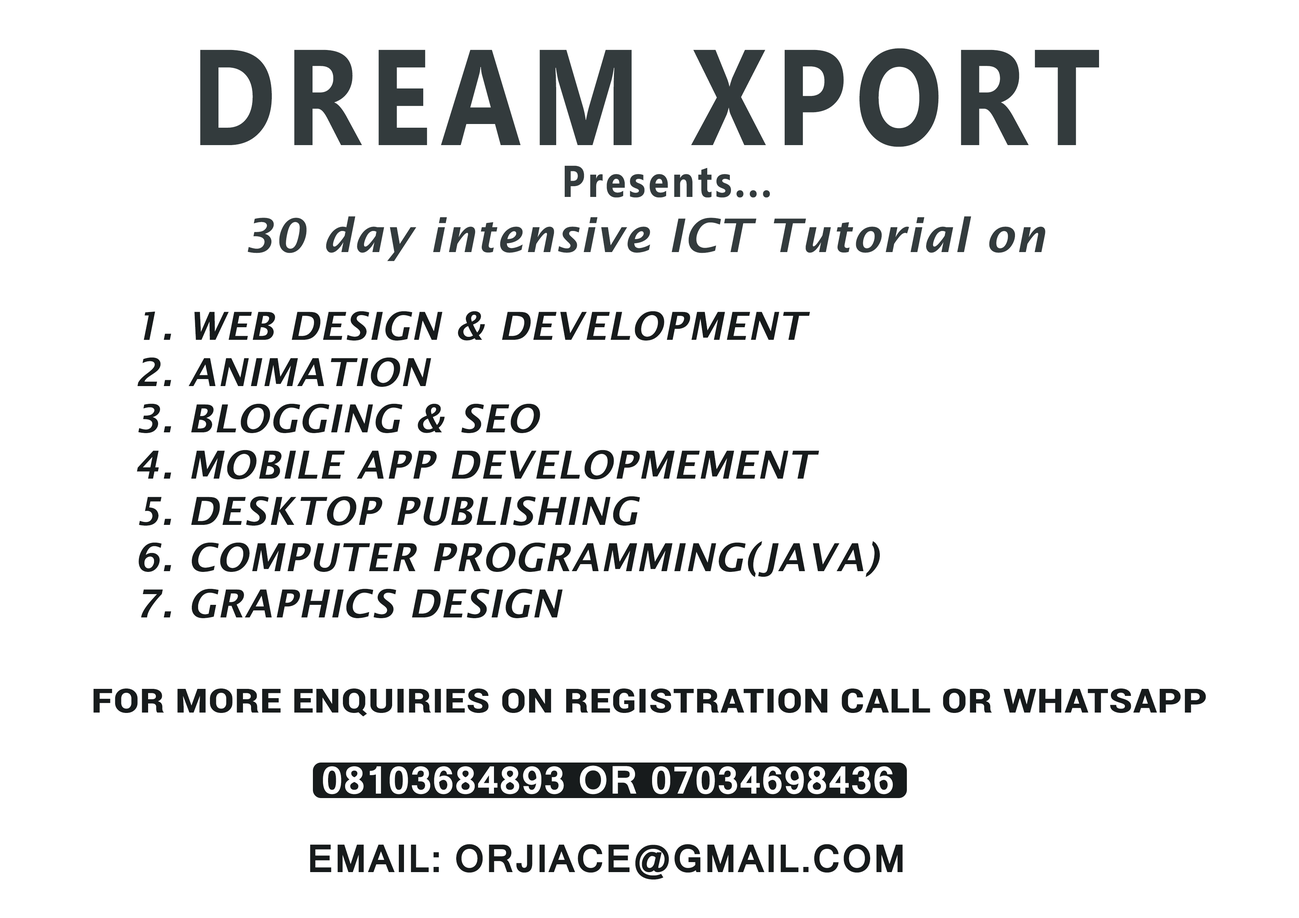
<style>
.page{position:relative;width:1299px;height:918px;background:#ffffff}
.page>*{position:absolute;margin:0}
.t1{font:136px "KhmerUI-Bold";letter-spacing:0.08em;color:#333b3d;scale:0.85 1}
.t2{font:44.5px "KhmerUI-Bold";letter-spacing:0.08em;color:#333b3d;scale:0.85 1}
.t3{font:46.3px "LucidaSans-DemiItalic";letter-spacing:0.025em;color:#333b3d}
.t4{font:38.6px "LucidaSans-DemiItalic";letter-spacing:0.025em;color:#171b1c;text-transform:uppercase}
.t5{font:33.3px "Roboto-Black";letter-spacing:0.025em;color:#171b1c;text-transform:uppercase;scale:1.11 1}
.t6{font:37px "Kartika-Bold";letter-spacing:0.025em;color:#ffffff;text-transform:uppercase}
.t7{font:37px "Kartika-Bold";letter-spacing:0.025em;color:#171b1c;text-transform:uppercase}
</style>
<div class="page">
<p class="t1" style="left:200px;top:48px;width:899px;height:99px">DREAM XPORT</p>
<p class="t2" style="left:565px;top:165px;width:205px;height:33px">Presents...</p>
<p class="t3" style="left:248px;top:216px;width:797px;height:45px">30 day intensive ICT Tutorial on</p>
<p class="t4" style="left:137px;top:311px;width:743px;height:307px">1. web design &amp; development<br>2. animation<br>3. blogging &amp; seo<br>4. mobile app developmement<br>5. Desktop PUBLISHING<br>6. COMPUTER PROGRAMMING(JAVA)<br>7. GRAPHICS DESIGN</p>
<p class="t5" style="left:93px;top:689px;width:1113px;height:28px">for more enquiries on registration call or whatsapp</p>
<p class="t6" style="left:323px;top:766px;width:570px;height:28px">08103684893 OR 07034698436</p>
<p class="t7" style="left:310px;top:844px;width:593px;height:36px">EMAIL: ORJIACE@GMAIL.COM</p>
</div>
